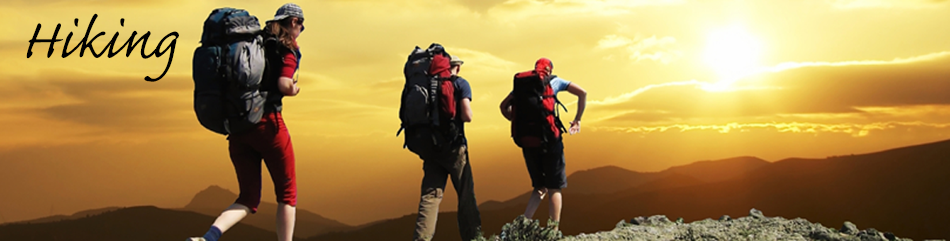
<style>
.page{position:relative;width:950px;height:241px}
.page>*{position:absolute;margin:0}
.t1{font:72px "CaflischScriptPro-Regular";color:#000000}
</style>
<div class="page">
<p class="t1" style="left:26px;top:13px;width:153px;height:69px">Hiking</p>
</div>
